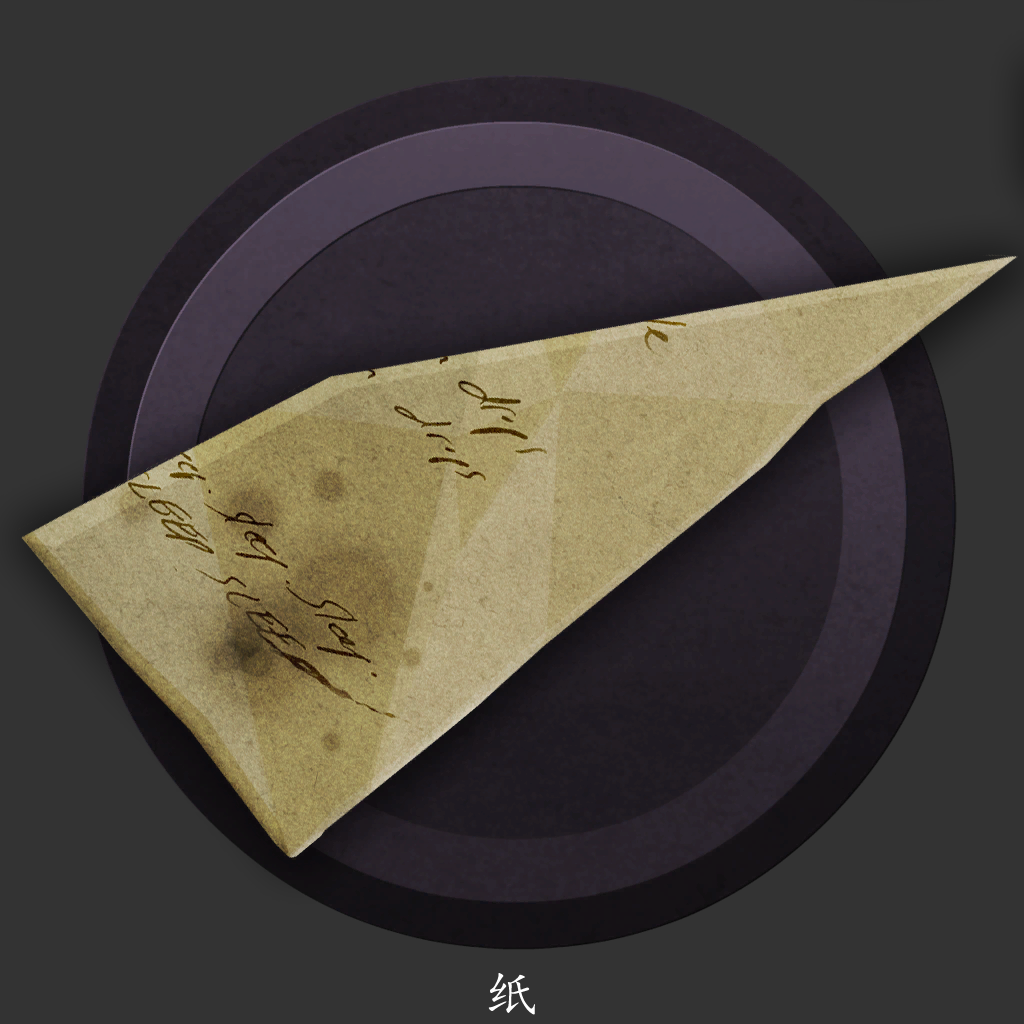
<style>
.page{position:relative;width:1024px;height:1024px;background:#333333}
.page>*{position:absolute;margin:0}
.t1{font:53.3px "STKaiti";letter-spacing:0.1em;color:#ffffff}
</style>
<div class="page">
<p class="t1" style="left:488px;top:973px;width:47px;height:42px">纸</p>
</div>
